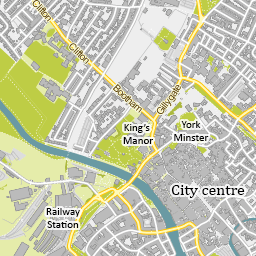
<style>
.page{position:relative;width:256px;height:256px}
.page>*{position:absolute;margin:0}
.t1{font:11px "Calibri";color:#000000}
.t2{font:16px "Cambria";color:#000000}
</style>
<div class="page">
<p class="t1" style="left:123px;top:124px;width:30px;height:20px;text-align:center">King’s <br>Manor</p>
<p class="t1" style="left:174px;top:121px;width:35px;height:20px;text-align:center">York<br>Minster</p>
<p class="t2" style="left:171px;top:185px;width:74px;height:13px">City centre</p>
<p class="t1" style="left:46px;top:208px;width:34px;height:20px;text-align:center">Railway<br>Station</p>
</div>
